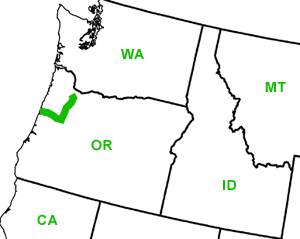
<style>
.page{position:relative;width:300px;height:239px;background:#ffffff}
.page>*{position:absolute;margin:0}
.t1{font:14px "Arial-BoldMT";letter-spacing:0.05em;color:#12bf00}
</style>
<div class="page">
<p class="t1" style="left:121px;top:49px;width:23px;height:10px">WA</p>
<p class="t1" style="left:265px;top:82px;width:21px;height:10px">MT</p>
<p class="t1" style="left:91px;top:139px;width:22px;height:12px">OR</p>
<p class="t1" style="left:223px;top:180px;width:13px;height:10px">ID</p>
<p class="t1" style="left:37px;top:214px;width:21px;height:11px">CA</p>
</div>
